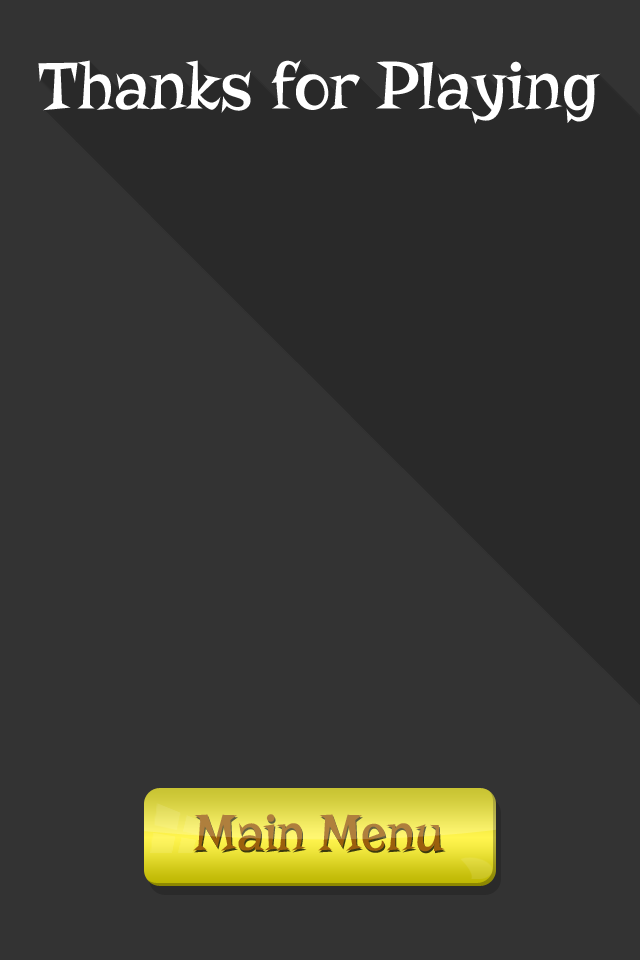
<style>
.page{position:relative;width:640px;height:960px;background:#333333}
.page>*{position:absolute;margin:0}
.t1{font:69.8px "Risque-Regular";color:#ffffff}
.t2{font:52.9px "Risque-Regular"}
</style>
<div class="page">
<p class="t1" style="left:38px;top:59px;width:563px;height:65px">Thanks for Playing</p>
<p class="t2" style="left:193px;top:814px;width:252px;height:38px">Main Menu</p>
</div>
